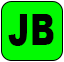
<style>
.page{position:relative;width:64px;height:62px;background:#02fa02}
.page>*{position:absolute;margin:0}
.t1{font:42.7px "Arial-Black";color:#000000;scale:0.75 1}
</style>
<div class="page">
<p class="t1" style="left:8px;top:14px;width:46px;height:32px">JB</p>
</div>
